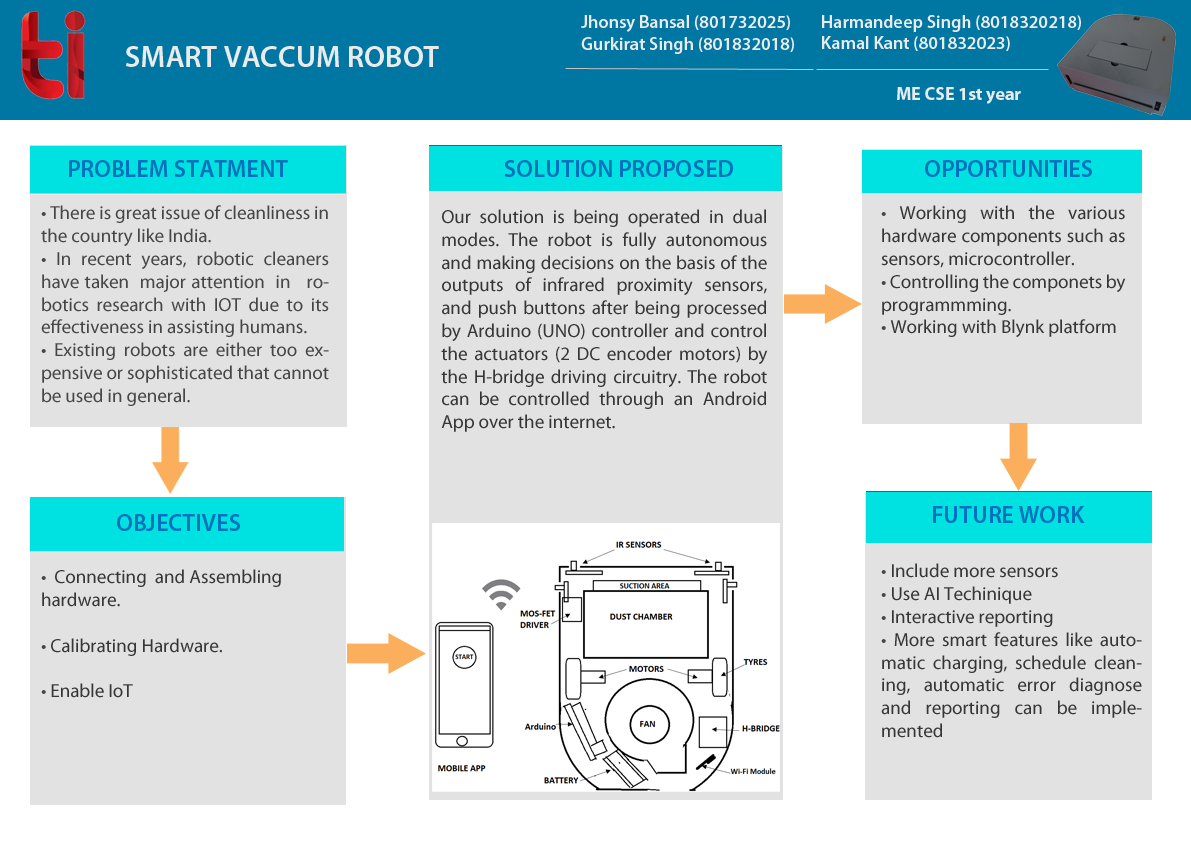
<style>
.page{position:relative;width:1191px;height:842px;background:#e2e2e2}
.page>*{position:absolute;margin:0}
.t1{font:18px "MyriadPro-Semibold";color:#ebebeb}
.t2{font:30px "MyriadPro-Semibold";color:#ebebeb}
.t3{font:24px "MyriadPro-Semibold";color:#0072bc}
.t4{font:19px "MyriadPro-Regular";color:#464646}
.t5{font:19px "MyriadPro-Regular";color:#363636}
</style>
<div class="page">
<p class="t1" style="left:581px;top:15px;width:213px;height:39px">Jhonsy Bansal (801732025)<br>Gurkirat Singh (801832018)</p>
<p class="t1" style="left:822px;top:15px;width:259px;height:36px">Harmandeep Singh (8018320218)<br>Kamal Kant (801832023)</p>
<p class="t2" style="left:126px;top:46px;width:313px;height:21px">SMART VACCUM ROBOT</p>
<p class="t3" style="left:69px;top:160px;width:219px;height:17px">PROBLEM STATMENT</p>
<p class="t3" style="left:504px;top:160px;width:229px;height:17px">SOLUTION PROPOSED</p>
<p class="t3" style="left:925px;top:160px;width:167px;height:17px">OPPORTUNITIES</p>
<p class="t4" style="left:41px;top:205px;width:288px;height:201px;text-align:justify">• There is great issue of cleanliness in the country like India.<br>• In recent years, robotic cleaners have taken  major attention  in   robotics research with IOT due to its  effectiveness in assisting humans. <br>• Existing robots are either too expensive or sophisticated that cannot be used in general.</p>
<p class="t5" style="left:441px;top:209px;width:327px;height:223px;text-align:justify">Our solution is being operated in dual modes. The robot is fully autonomous and making decisions on the basis of the outputs of infrared proximity sensors, and push buttons after being processed by Arduino (UNO) controller and control the actuators (2 DC encoder motors) by the H-bridge driving circuitry. The robot can be controlled through an Android App over the internet.</p>
<p class="t5" style="left:881px;top:205px;width:245px;height:132px;text-align:justify"><span class="t4">• </span>Working with the various hardware components such as sensors, microcontroller.<br><span class="t4">• </span>Controlling the componets by programmming.<br><span class="t4">• </span>Working with Blynk platform</p>
<p class="t3" style="left:933px;top:506px;width:152px;height:17px">FUTURE WORK</p>
<p class="t3" style="left:117px;top:514px;width:123px;height:17px">OBJECTIVES</p>
<p class="t5" style="left:41px;top:569px;width:240px;height:129px"><span class="t4">•  </span>Connecting  and Assembling <br>hardware.<br><br><span class="t4">• </span>Calibrating Hardware.<br><br><span class="t4">• </span>Enable IoT</p>
<p class="t5" style="left:881px;top:563px;width:261px;height:175px;text-align:justify"><span class="t4">• </span>Include more sensors<br><span class="t4">• </span>Use AI Techinique<br><span class="t4">• </span>Interactive reporting <br><span class="t4">• </span>More smart features like automatic charging, schedule cleaning, automatic error diagnose and reporting can be implemented</p>
</div>
